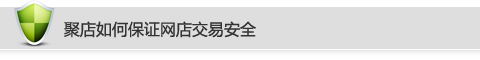
<style>
.page{position:relative;width:480px;height:60px;background:#dedede}
.page>*{position:absolute;margin:0}
.t1{font:16px "MicrosoftYaHei";color:#333333}
</style>
<div class="page">
<p class="t1" style="left:64px;top:21px;width:192px;height:17px">聚店如何保证网店交易安全</p>
</div>
